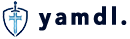
<style>
.page{position:relative;width:130px;height:39px;background:#ffffff}
.page>*{position:absolute;margin:0}
.t1{font:24px "Avenir-Black";letter-spacing:0.16em;color:#000c2d;font-weight:bold;scale:0.9 1}
</style>
<div class="page">
<p class="t1" style="left:38px;top:6px;width:89px;height:25px">yamdl.</p>
</div>
